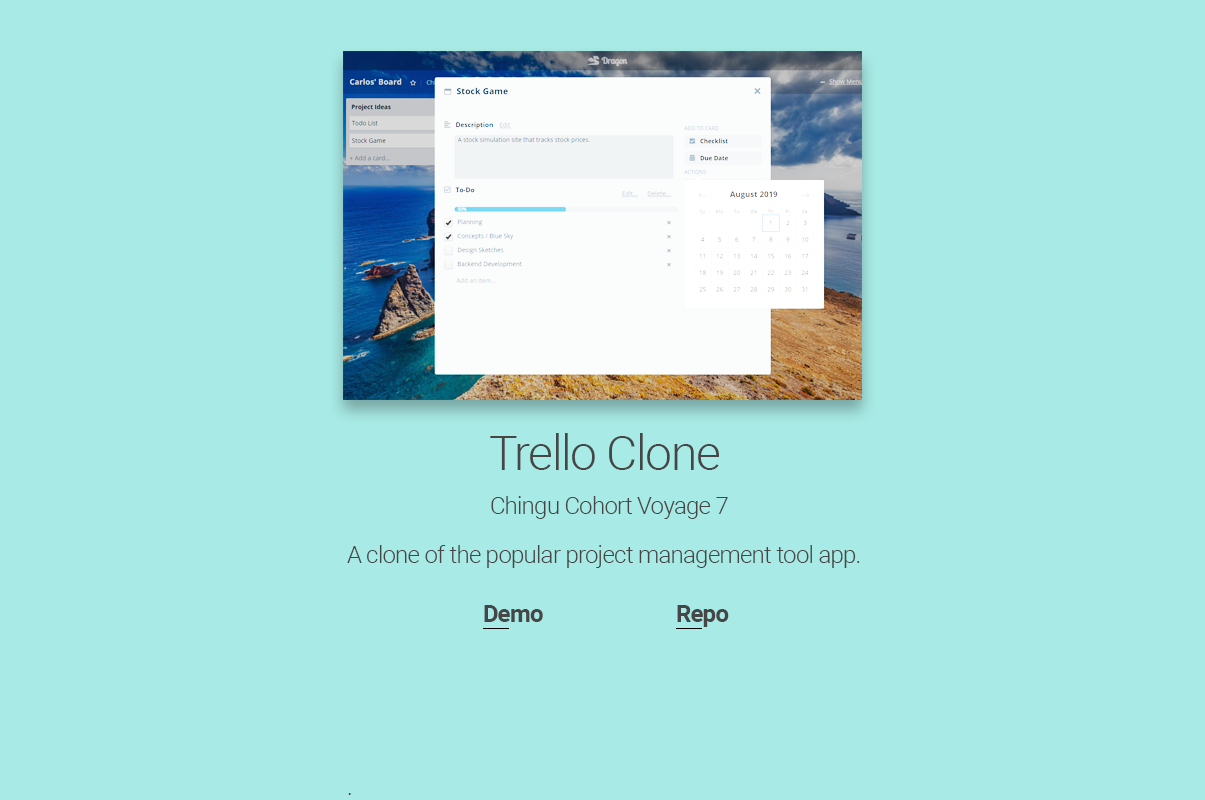
<style>
.page{position:relative;width:1205px;height:800px;background:#a8eae5}
.page>*{position:absolute;margin:0}
.t1{font:48px "Roboto-Light";letter-spacing:-0.03em;color:#464646}
.t2{font:24px "Roboto-Light";letter-spacing:-0.03em;color:#464646}
.t3{font:24px/232px "Roboto-Light";letter-spacing:-0.03em;color:#464646}
.t4{font:24px "Roboto-Bold";letter-spacing:-0.03em;color:#464646}
</style>
<div class="page">
<p class="t1" style="left:490px;top:433px;width:229px;height:37px">Trello Clone</p>
<p class="t2" style="left:491px;top:496px;width:237px;height:23px">Chingu Cohort Voyage 7</p>
<p class="t3" style="left:347px;top:545px;width:513px;height:250px">A clone of the popular project management tool app.<br>.</p>
<p class="t4" style="left:484px;top:605px;width:59px;height:17px">Demo</p>
<p class="t4" style="left:677px;top:605px;width:52px;height:22px">Repo</p>
</div>
